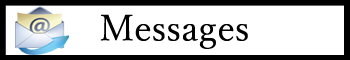
<style>
.page{position:relative;width:350px;height:60px;background:#ffffff}
.page>*{position:absolute;margin:0}
.t1{font:36px "YuMincho-Regular";color:#000000}
</style>
<div class="page">
<p class="t1" style="left:100px;top:14px;width:148px;height:35px">Messages</p>
</div>
